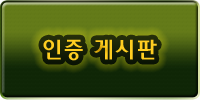
<style>
.page{position:relative;width:200px;height:100px}
.page>*{position:absolute;margin:0}
.t1{font:24px "2002L";letter-spacing:0.05em;color:#ffce21}
</style>
<div class="page">
<p class="t1" style="left:43px;top:39px;width:114px;height:22px">인증 게시판</p>
</div>
